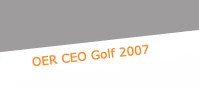
<style>
.page{position:relative;width:199px;height:86px;background:#9e9c9d}
.page>*{position:absolute;margin:0}
.t1{font:12px "Verdana";color:#ff8820}
</style>
<div class="page">
<p class="t1" style="left:32px;top:44px;width:117px;height:23px;rotate:-6deg">OER CEO Golf 2007</p>
</div>
